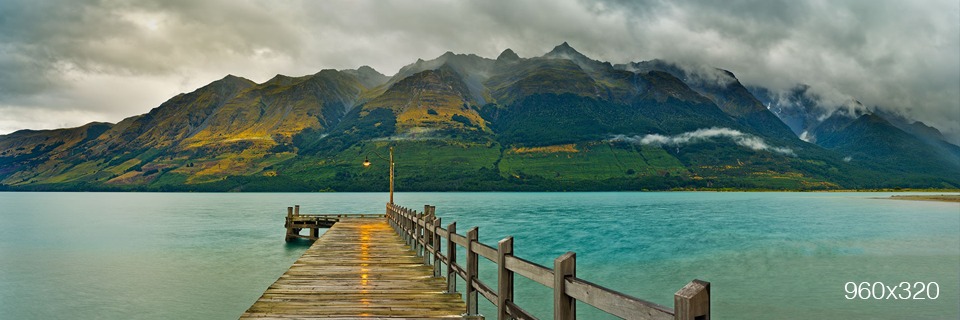
<style>
.page{position:relative;width:960px;height:320px}
.page>*{position:absolute;margin:0}
.t1{font:25px "Helvetica-Light";color:#ffffff}
</style>
<div class="page">
<p class="t1" style="left:844px;top:282px;width:95px;height:17px">960x320</p>
</div>
